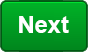
<style>
.page{position:relative;width:88px;height:52px}
.page>*{position:absolute;margin:0}
.t1{font:24px "Arial-BoldMT";letter-spacing:-0.01em;color:#ffffff}
</style>
<div class="page">
<p class="t1" style="left:19px;top:16px;width:50px;height:17px">Next</p>
</div>
